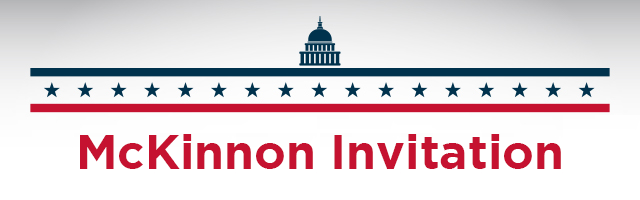
<style>
.page{position:relative;width:640px;height:200px;background:#ffffff}
.page>*{position:absolute;margin:0}
.t1{font:48px "Gotham-Bold";color:#c51230}
</style>
<div class="page">
<p class="t1" style="left:80px;top:134px;width:481px;height:35px">McKinnon Invitation</p>
</div>
